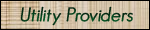
<style>
.page{position:relative;width:150px;height:30px}
.page>*{position:absolute;margin:0}
.t1{font:19px "GeosansLight-Oblique";color:#003917;font-weight:bold}
</style>
<div class="page">
<p class="t1" style="left:20px;top:6px;width:113px;height:20px">Utility Providers</p>
</div>
